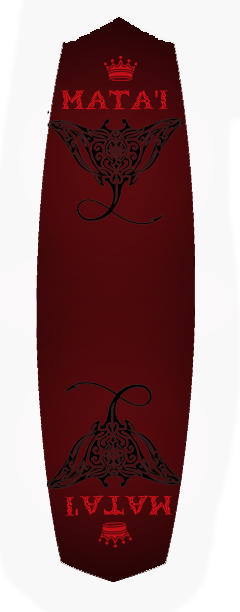
<style>
.page{position:relative;width:240px;height:612px;background:#f9f8f8}
.page>*{position:absolute;margin:0}
.t1{font:26.5px "Tribalcase";color:#cf111a}
.t2{font:26.5px "MyriadPro-Regular";color:#cf111a}
</style>
<div class="page">
<p class="t1" style="left:61px;top:90px;width:107px;height:20px">mata<span class="t2">'</span>i</p>
<p class="t1" style="left:65px;top:495px;width:107px;height:21px;rotate:179deg">mata<span class="t2">'</span>i</p>
</div>
